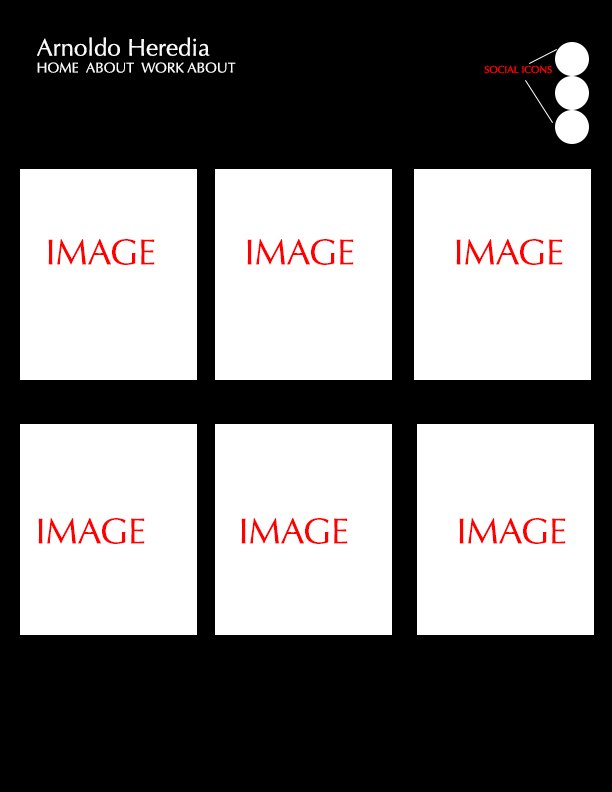
<style>
.page{position:relative;width:612px;height:792px;background:#000000}
.page>*{position:absolute;margin:0}
.t1{font:14px "Optima-Regular";color:#fafafa}
.t2{font:24px "Optima-Regular";color:#fafafa}
.t3{font:10px "Optima-Regular";color:#ff0000}
.t4{font:36px "Optima-Regular";color:#ff0000}
</style>
<div class="page">
<p class="t1" style="left:37px;top:37px;width:199px;height:36px"><span class="t2">Arnoldo Heredia<br></span>HOME  ABOUT  WORK ABOUT</p>
<p class="t3" style="left:484px;top:65px;width:68px;height:9px">SOCIAL ICONS</p>
<p class="t4" style="left:48px;top:239px;width:107px;height:26px">IMAGE</p>
<p class="t4" style="left:247px;top:239px;width:107px;height:26px">IMAGE</p>
<p class="t4" style="left:456px;top:239px;width:107px;height:26px">IMAGE</p>
<p class="t4" style="left:38px;top:518px;width:107px;height:26px">IMAGE</p>
<p class="t4" style="left:241px;top:518px;width:107px;height:26px">IMAGE</p>
<p class="t4" style="left:459px;top:518px;width:107px;height:26px">IMAGE</p>
</div>
